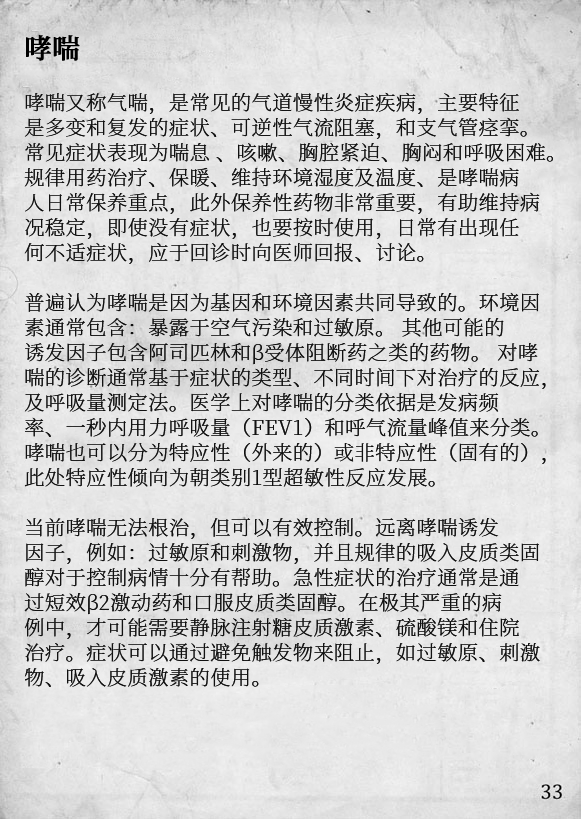
<style>
.page{position:relative;width:581px;height:819px}
.page>*{position:absolute;margin:0}
.t1{font:20.2px/25px "SourceHanSerifCN-ExtraLight";letter-spacing:0.02em;color:#111111}
.t2{font:27.2px/29px "SourceHanSerifCN-SemiBold";letter-spacing:0.02em;color:#000000;font-weight:bold}
</style>
<div class="page">
<p class="t1" style="left:24px;top:35px;width:529px;height:652px"><span class="t2">哮喘<br><br></span>哮喘又称气喘，是常见的气道慢性炎症疾病，主要特征<br>是多变和复发的症状、可逆性气流阻塞，和支气管痉挛。<br>常见症状表现为喘息 、咳嗽、胸腔紧迫、胸闷和呼吸困难。<br>规律用药治疗、保暖、维持环境湿度及温度、是哮喘病<br>人日常保养重点，此外保养性药物非常重要，有助维持病<br>况稳定，即使没有症状，也要按时使用，日常有出现任<br>何不适症状，应于回诊时向医师回报、讨论。<br><br>普遍认为哮喘是因为基因和环境因素共同导致的。环境因<br>素通常包含：暴露于空气污染和过敏原。 其他可能的<br>诱发因子包含阿司匹林和β受体阻断药之类的药物。 对哮<br>喘的诊断通常基于症状的类型、不同时间下对治疗的反应，<br>及呼吸量测定法。医学上对哮喘的分类依据是发病频<br>率、一秒内用力呼吸量（FEV1）和呼气流量峰值来分类。<br>哮喘也可以分为特应性（外来的）或非特应性（固有的），<br>此处特应性倾向为朝类别1型超敏性反应发展。<br><br>当前哮喘无法根治，但可以有效控制。远离哮喘诱发<br>因子，例如：过敏原和刺激物，并且规律的吸入皮质类固<br>醇对于控制病情十分有帮助。急性症状的治疗通常是通<br>过短效β2激动药和口服皮质类固醇。在极其严重的病<br>例中，才可能需要静脉注射糖皮质激素、硫酸镁和住院<br>治疗。症状可以通过避免触发物来阻止，如过敏原、刺激<br>物、吸入皮质激素的使用。</p>
</div>
